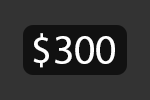
<style>
.page{position:relative;width:150px;height:100px;background:#333333}
.page>*{position:absolute;margin:0}
.t1{font:41.7px "MyriadPro-Regular";color:#ffffff}
</style>
<div class="page">
<p class="t1" style="left:33px;top:33px;width:82px;height:35px">$300</p>
</div>
